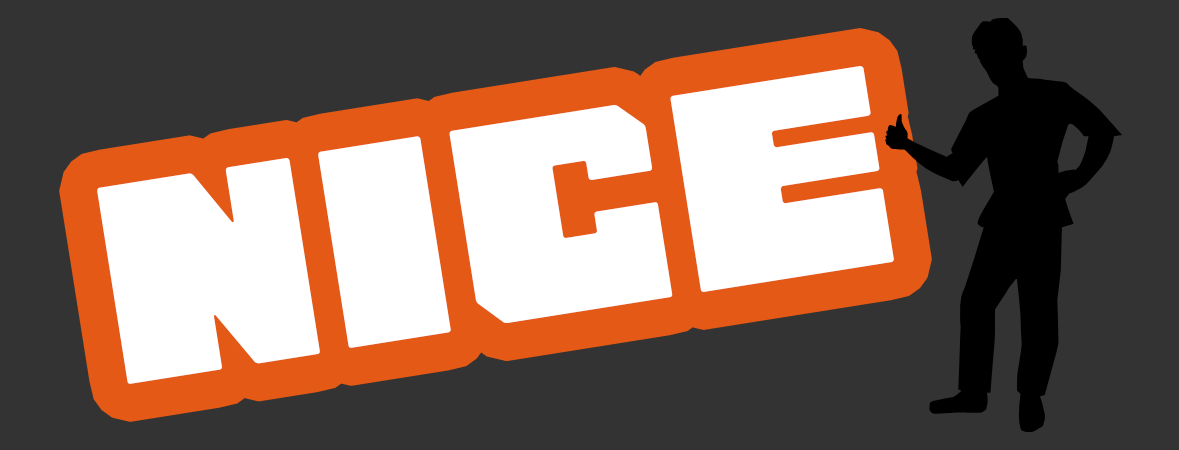
<style>
.page{position:relative;width:1179px;height:450px;background:#333333}
.page>*{position:absolute;margin:0}
.t1{font:223.7px "AB-countryroad";color:#ffffff}
</style>
<div class="page">
<p class="t1" style="left:97px;top:66px;width:797px;height:318px;rotate:-9deg">NICE</p>
</div>
